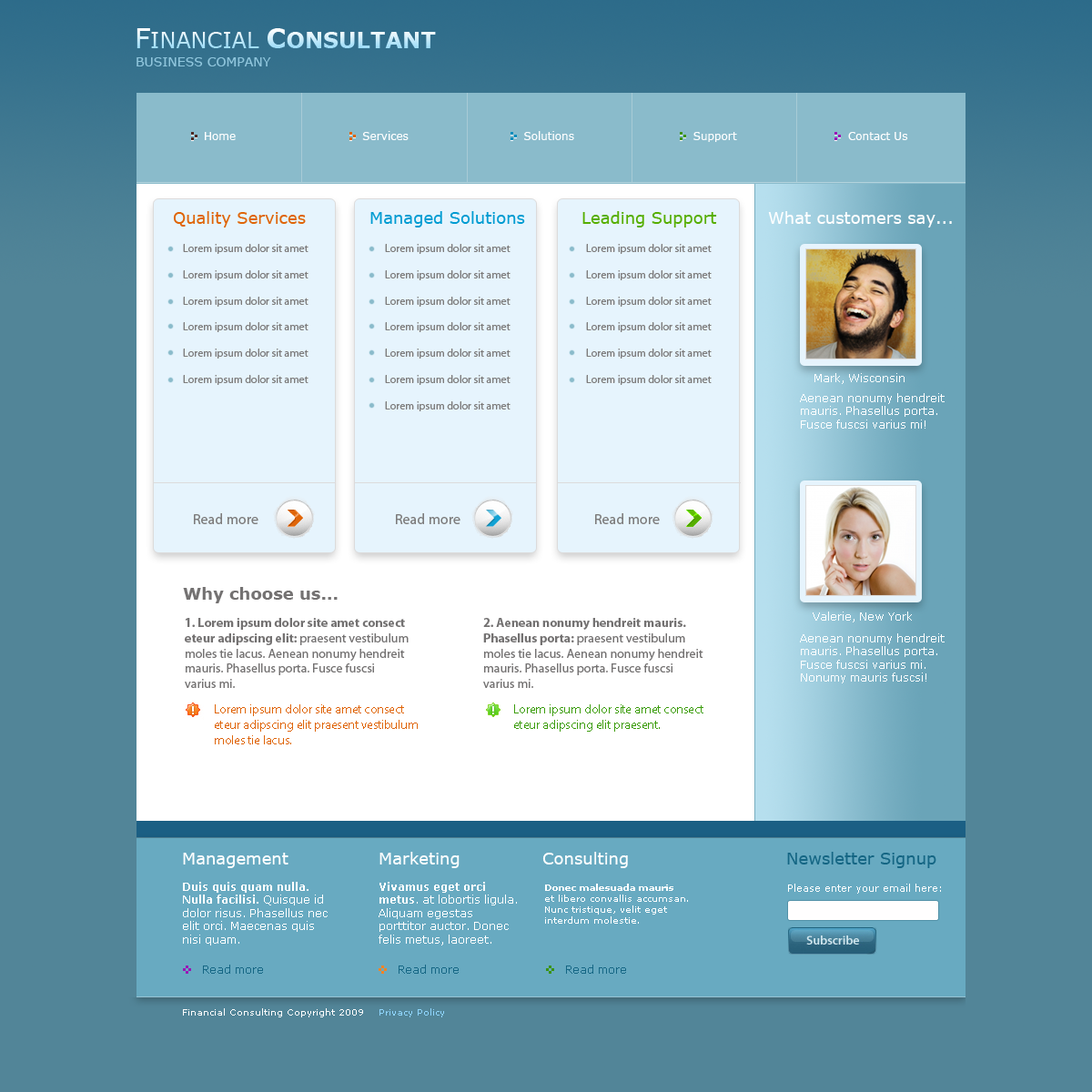
<style>
.page{position:relative;width:1092px;height:1092px;background:#528598}
.page>*{position:absolute;margin:0}
.t1{font:21.8px "Verdana-Bold"}
.t2{font:27.3px "Verdana"}
.t3{font:21.8px "Verdana"}
.t4{font:27.3px "Verdana-Bold"}
.t5{font:12.7px "Verdana";color:#8fc5dc}
.t6{font:10.9px "Verdana";color:#ffffff}
.t7{font:16.4px "Verdana";color:#df6509}
.t8{font:16.4px "Verdana";color:#019cd2}
.t9{font:16.4px "Verdana";color:#56ae00}
.t10{font:16.4px "Verdana";color:#ffffff}
.t11{font:10.9px "MyriadPro-Regular";color:#7d7c7c}
.t12{font:14.6px "MyriadPro-Regular";color:#7d7c7c}
.t13{font:16.4px "Verdana-Bold";color:#747272}
.t14{font:12.7px "MyriadPro-Regular";color:#747272}
.t15{font:12.7px "MyriadPro-Bold";color:#747272}
.t16{font:12.7px "MyriadPro-Regular";color:#df6509}
.t17{font:12.7px "MyriadPro-Regular";color:#3d9d0d}
.t18{font:16.4px "Verdana";color:#156684}
.t19{font:10.9px "Verdana-Bold";color:#ffffff}
.t20{font:10.9px "Verdana";color:#fefefe}
.t21{font:10.9px "Verdana-Bold";color:#fefefe}
.t22{font:9.1px "Verdana";color:#ffffff}
.t23{font:9.1px "Verdana-Bold";color:#ffffff}
.t24{font:10px "Verdana";color:#ffffff}
.t25{font:10.9px "Verdana";color:#156684}
.t26{font:9.1px "Verdana";color:#fefdfd}
.t27{font:9.1px "Verdana";color:#8fd5fd}
</style>
<div class="page">
<p class="t1" style="left:136px;top:28px;width:300px;height:20px"><span class="t2">F</span><span class="t3">INANCIAL </span><span class="t4">C</span>ONSULTANT</p>
<p class="t5" style="left:136px;top:57px;width:135px;height:9px">BUSINESS COMPANY</p>
<p class="t6" style="left:205px;top:131px;width:703px;height:11px">Home                                 Services                              Solutions                               Support                             Contact Us</p>
<p class="t7" style="left:173px;top:211px;width:133px;height:16px">Quality Services</p>
<p class="t8" style="left:370px;top:211px;width:155px;height:16px">Managed Solutions</p>
<p class="t9" style="left:582px;top:211px;width:135px;height:16px">Leading Support</p>
<p class="t10" style="left:768px;top:211px;width:184px;height:16px">What customers say...</p>
<p class="t11" style="left:183px;top:244px;width:125px;height:141px">Lorem ipsum dolor sit amet<br><br>Lorem ipsum dolor sit amet<br><br>Lorem ipsum dolor sit amet<br><br>Lorem ipsum dolor sit amet<br><br>Lorem ipsum dolor sit amet<br><br>Lorem ipsum dolor sit amet</p>
<p class="t11" style="left:385px;top:244px;width:126px;height:167px">Lorem ipsum dolor sit amet<br><br>Lorem ipsum dolor sit amet<br><br>Lorem ipsum dolor sit amet<br><br>Lorem ipsum dolor sit amet<br><br>Lorem ipsum dolor sit amet<br><br>Lorem ipsum dolor sit amet<br><br>Lorem ipsum dolor sit amet</p>
<p class="t11" style="left:586px;top:244px;width:126px;height:141px">Lorem ipsum dolor sit amet<br><br>Lorem ipsum dolor sit amet<br><br>Lorem ipsum dolor sit amet<br><br>Lorem ipsum dolor sit amet<br><br>Lorem ipsum dolor sit amet<br><br>Lorem ipsum dolor sit amet</p>
<p class="t6" style="left:814px;top:373px;width:91px;height:11px">Mark, Wisconsin</p>
<p class="t6" style="left:800px;top:393px;width:145px;height:36px">Aenean nonumy hendreit<br>mauris. Phasellus porta.<br>Fusce fuscsi varius mi!</p>
<p class="t12" style="left:194px;top:513px;width:64px;height:11px">Read more</p>
<p class="t12" style="left:396px;top:513px;width:64px;height:11px">Read more</p>
<p class="t12" style="left:595px;top:513px;width:65px;height:11px">Read more</p>
<p class="t13" style="left:183px;top:587px;width:155px;height:16px">Why choose us...</p>
<p class="t14" style="left:185px;top:618px;width:224px;height:70px"><span class="t15">1. Lorem ipsum dolor site amet consect<br>eteur adipscing elit: </span>praesent vestibulum<br>moles tie lacus. Aenean nonumy hendreit<br>mauris. Phasellus porta. Fusce fuscsi <br>varius mi.</p>
<p class="t14" style="left:483px;top:618px;width:220px;height:70px"><span class="t15">2. Aenean nonumy hendreit mauris. <br>Phasellus porta: </span>praesent vestibulum<br>moles tie lacus. Aenean nonumy hendreit<br>mauris. Phasellus porta. Fusce fuscsi <br>varius mi.</p>
<p class="t6" style="left:813px;top:612px;width:99px;height:10px">Valerie, New York</p>
<p class="t6" style="left:800px;top:633px;width:145px;height:50px">Aenean nonumy hendreit<br>mauris. Phasellus porta.<br>Fusce fuscsi varius mi.<br>Nonumy mauris fuscsi!</p>
<p class="t16" style="left:215px;top:704px;width:203px;height:40px">Lorem ipsum dolor site amet consect<br>eteur adipscing elit praesent vestibulum<br>moles tie lacus.</p>
<p class="t17" style="left:514px;top:704px;width:189px;height:28px">Lorem ipsum dolor site amet consect<br>eteur adipscing elit praesent.</p>
<p class="t10" style="left:183px;top:852px;width:445px;height:16px">Management   Marketing   Consulting</p>
<p class="t18" style="left:787px;top:852px;width:149px;height:16px">Newsletter Signup</p>
<p class="t6" style="left:183px;top:882px;width:145px;height:63px"><span class="t19">Duis quis quam nulla. <br>Nulla facilisi.</span> Quisque id <br>dolor risus. Phasellus nec <br>elit orci. Maecenas quis <br>nisi quam.</p>
<p class="t20" style="left:379px;top:882px;width:138px;height:63px"><span class="t21">Vivamus eget orci <br>metus</span>. at lobortis ligula.<br>Aliquam egestas <br>porttitor auctor. Donec<br>felis metus, laoreet.</p>
<p class="t22" style="left:545px;top:884px;width:143px;height:40px"><span class="t23">Donec malesuada mauris<br></span>et libero convallis accumsan. <br>Nunc tristique, velit eget <br>interdum molestie.</p>
<p class="t24" style="left:788px;top:884px;width:153px;height:10px">Please enter your email here:</p>
<p class="t25" style="left:203px;top:965px;width:60px;height:9px">Read more</p>
<p class="t25" style="left:399px;top:965px;width:60px;height:9px">Read more</p>
<p class="t25" style="left:566px;top:965px;width:60px;height:9px">Read more</p>
<p class="t26" style="left:183px;top:1008px;width:261px;height:9px">Financial Consulting Copyright 2009 <span class="t27">Privacy Policy</span></p>
</div>
